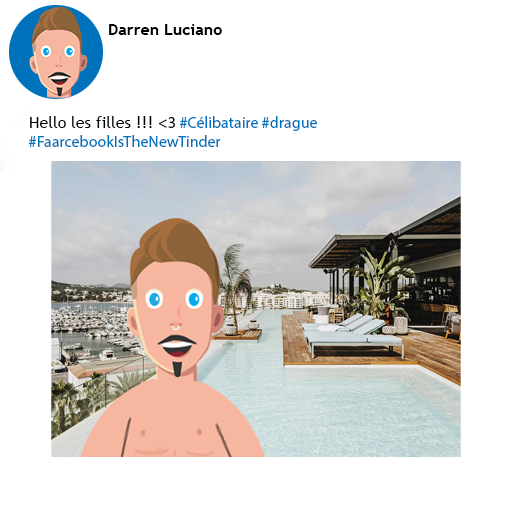
<style>
.page{position:relative;width:512px;height:512px;background:#ffffff}
.page>*{position:absolute;margin:0}
.t1{font:16px "TrebuchetMS-Bold";color:#000000}
.t2{font:16px "MyriadPro-Regular";color:#0072bc}
.t3{font:16px "TrebuchetMS";color:#000000}
.t4{font:16px "MyriadPro-Regular";color:#000000}
</style>
<div class="page">
<p class="t1" style="left:109px;top:24px;width:113px;height:11px">Darren Luciano</p>
<p class="t2" style="left:29px;top:116px;width:288px;height:31px"><span class="t3">Hello les filles !!! </span><span class="t4">&lt;3 </span>#Célibataire #drague <br>#FaarcebookIsTheNewTinder</p>
</div>
